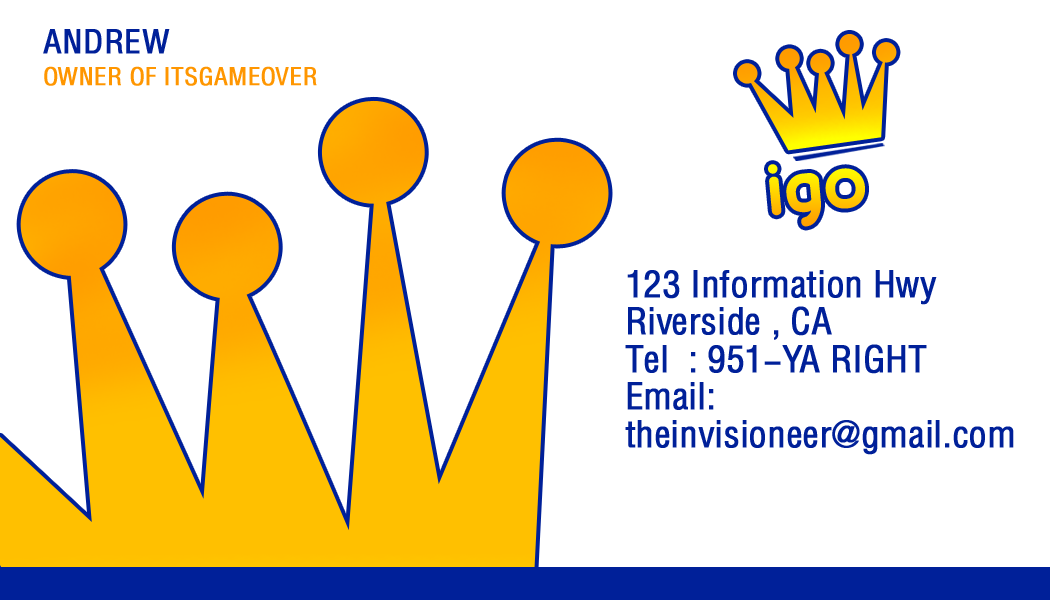
<style>
.page{position:relative;width:1050px;height:600px;background:#ffffff}
.page>*{position:absolute;margin:0}
.t1{font:33.3px "HeliosCond";letter-spacing:0.01em;color:#002099;text-transform:uppercase;font-weight:bold}
.t2{font:25px "HeliosCond";letter-spacing:0.01em;color:#ff9600;text-transform:uppercase;font-weight:bold}
.t3{font:84.2px "20thCenturyFont"}
.t4{font:37.5px/37.5px "HeliosCond";letter-spacing:-0.01em;color:#002099;font-weight:bold}
</style>
<div class="page">
<p class="t1" style="left:43px;top:29px;width:127px;height:25px">Andrew</p>
<p class="t2" style="left:44px;top:66px;width:273px;height:20px">Owner of ITSgameover</p>
<p class="t3" style="left:768px;top:164px;width:97px;height:63px;rotate:-5deg">igo</p>
<p class="t4" style="left:625px;top:270px;width:389px;height:185px">123 Information Hwy <br>Riverside , CA    <br>Tel  : 951-YA RIGHT    <br>Email: <br>theinvisioneer@gmail.com</p>
</div>
